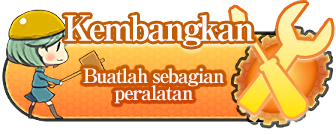
<style>
.page{position:relative;width:336px;height:135px;background:#ffffff}
.page>*{position:absolute;margin:0}
.t1{font:35px "RyuminPro-ExBold";letter-spacing:-0.08em;color:#ffffff}
.t2{font:20px/17px "RyuminPro-ExBold";letter-spacing:-0.08em;color:#fff6f1}
</style>
<div class="page">
<p class="t1" style="left:64px;top:14px;width:190px;height:33px">Kembangkan</p>
<p class="t2" style="left:83px;top:68px;width:141px;height:36px;text-align:center">Buatlah sebagian<br>peralatan</p>
</div>
